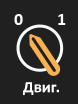
<style>
.page{position:relative;width:78px;height:104px;background:#202020}
.page>*{position:absolute;margin:0}
.t1{font:12px "Calibri-Bold";color:#ffffff}
</style>
<div class="page">
<p class="t1" style="left:23px;top:82px;width:36px;height:13px">Двиг.</p>
</div>
